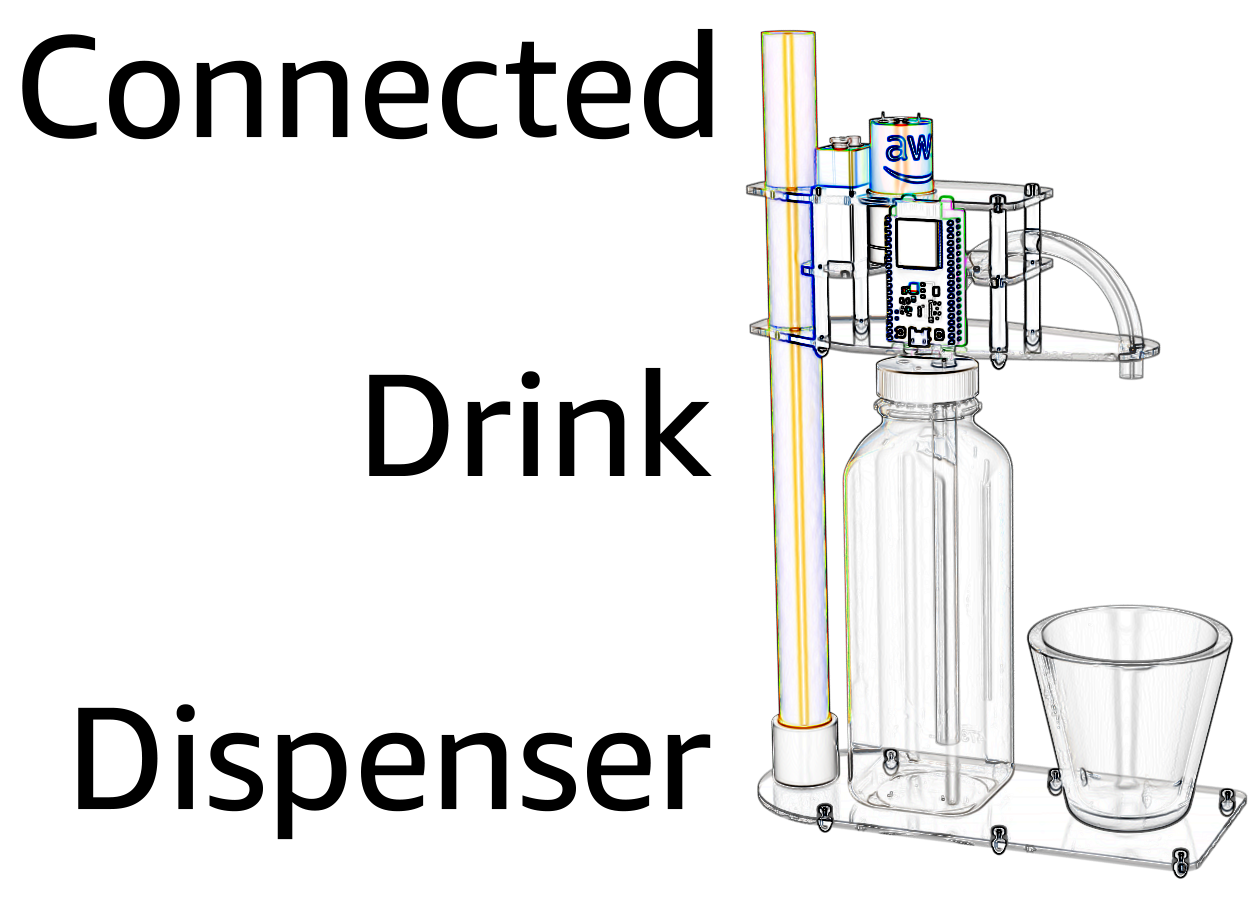
<style>
.page{position:relative;width:1248px;height:917px;background:#ffffff}
.page>*{position:absolute;margin:0}
.t1{font:146px "AmazonEmber-Regular";color:#000000}
</style>
<div class="page">
<p class="t1" style="left:22px;top:28px;width:691px;height:112px">Connected</p>
<p class="t1" style="left:369px;top:367px;width:343px;height:109px">Drink</p>
<p class="t1" style="left:78px;top:704px;width:633px;height:136px">Dispenser</p>
</div>
